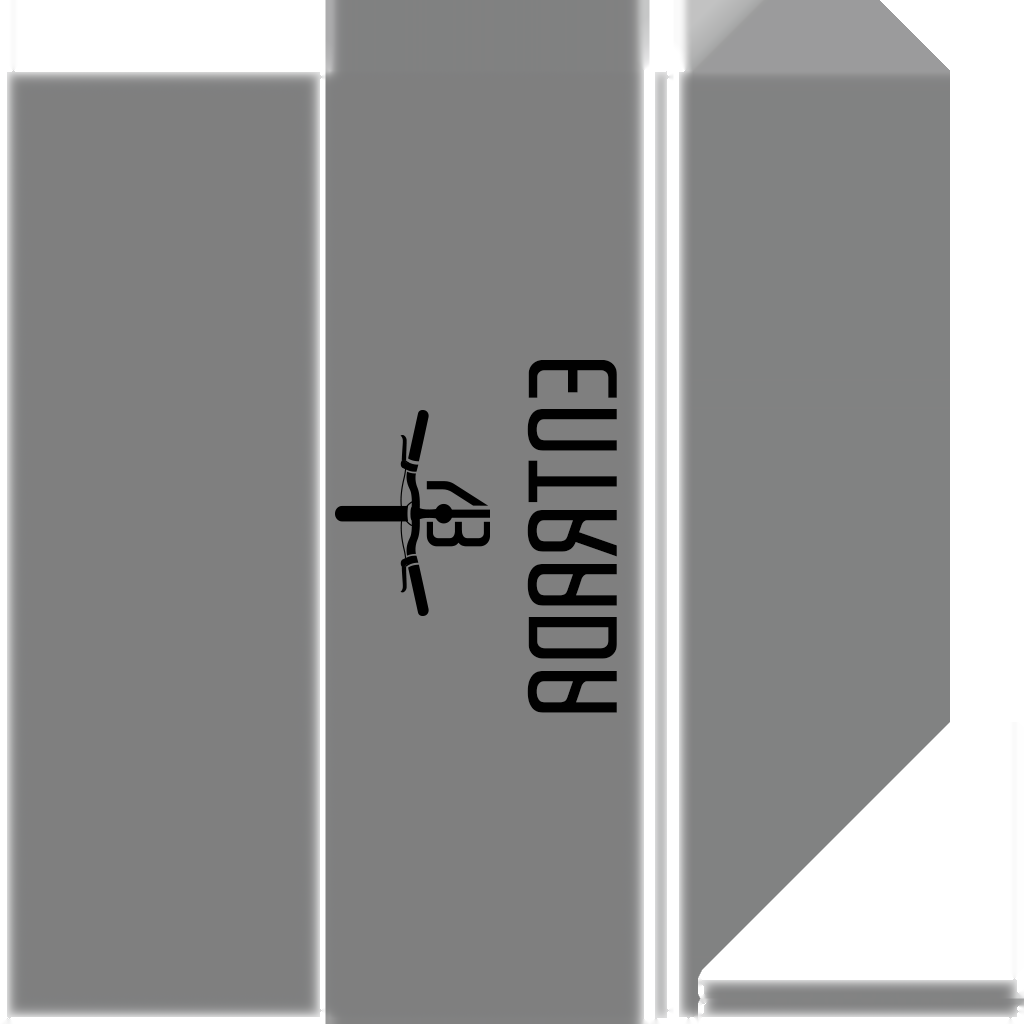
<style>
.page{position:relative;width:1024px;height:1024px;background:#7f7f7f}
.page>*{position:absolute;margin:0}
.t1{font:121.4px "Aldo-SemiBold";color:#010101}
</style>
<div class="page">
<p class="t1" style="left:527px;top:360px;width:90px;height:353px;rotate:90deg">ENTRADA</p>
</div>
